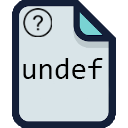
<style>
.page{position:relative;width:128px;height:128px;background:#d9e4e8}
.page>*{position:absolute;margin:0}
.t1{font:30px "Consolas";color:#000000}
</style>
<div class="page">
<p class="t1" style="left:23px;top:58px;width:80px;height:21px">undef</p>
</div>
